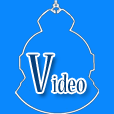
<style>
.page{position:relative;width:114px;height:114px;background:#0a88fd}
.page>*{position:absolute;margin:0}
.t1{font:26.4px "NuevaStd-Cond";letter-spacing:0.001em;color:#043e7a}
.t2{font:60.7px "NuevaStd-Cond";letter-spacing:0.001em;color:#043e7a}
</style>
<div class="page">
<p class="t1" style="left:27px;top:54px;width:58px;height:39px"><span class="t2">V</span>ideo</p>
</div>
